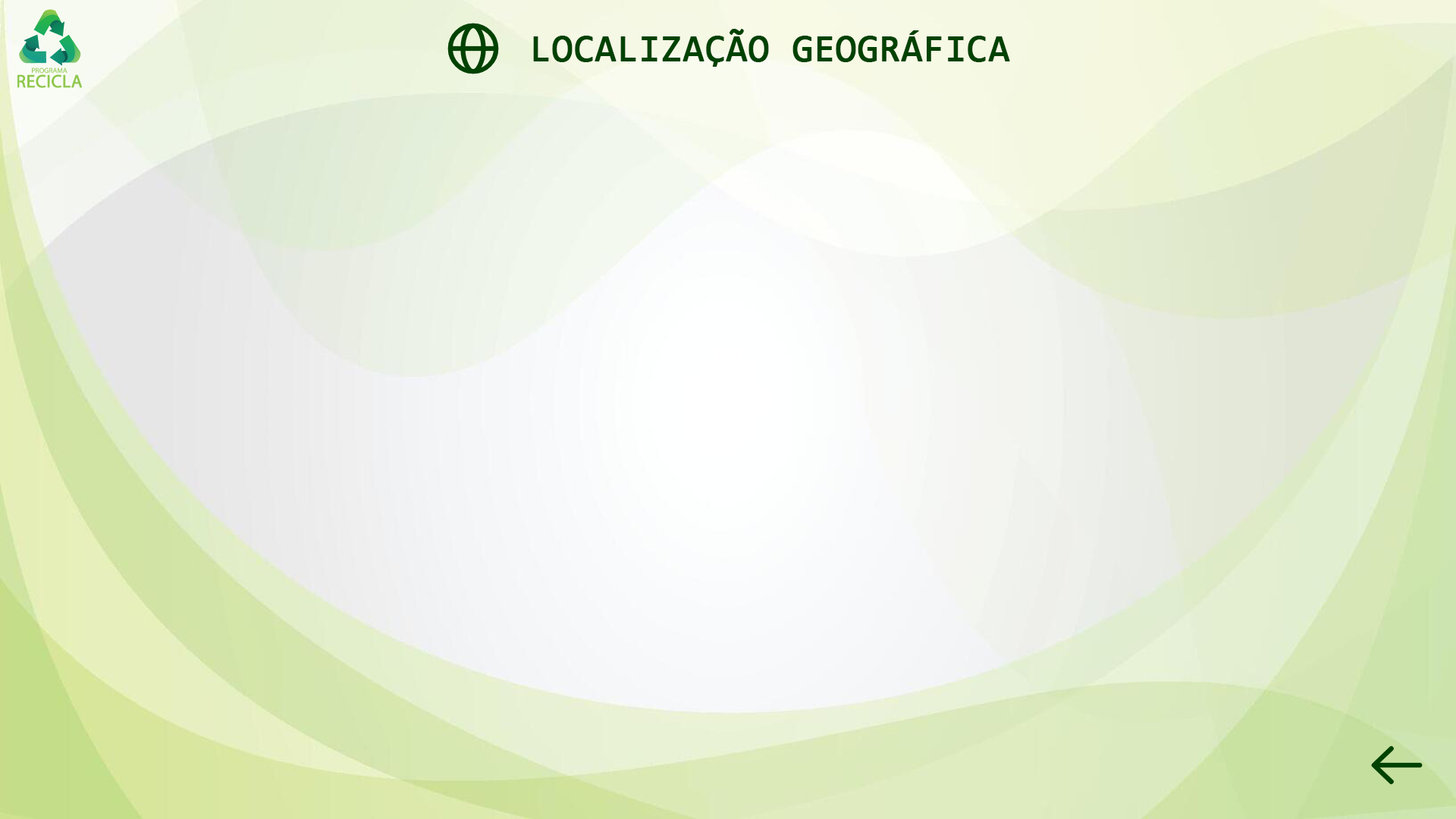
<style>
.page{position:relative;width:1456px;height:819px}
.page>*{position:absolute;margin:0}
.t1{font:37.9px "Consolas";color:#004201;font-weight:bold}
</style>
<div class="page">
<p class="t1" style="left:533px;top:29px;width:477px;height:38px">LOCALIZAÇÃO GEOGRÁFICA</p>
</div>
